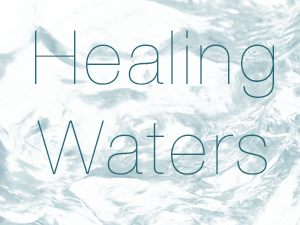
<style>
.page{position:relative;width:300px;height:225px;background:#fcfdfd}
.page>*{position:absolute;margin:0}
.t1{font:75px/20px "HelveticaNeue-UltraLight";letter-spacing:0.06em;color:#256d7b}
.t2{font:75px "HelveticaNeue-UltraLight";letter-spacing:0.06em;color:#256d7b}
</style>
<div class="page">
<p class="t1" style="left:35px;top:30px;width:239px;height:145px;text-align:center">Healing<br><span class="t2">Waters</span></p>
</div>
